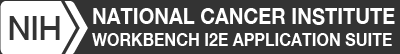
<style>
.page{position:relative;width:400px;height:54px;background:#333333}
.page>*{position:absolute;margin:0}
.t1{font:22px "HelveticaNeue-Bold";color:#ffffff;text-transform:uppercase;scale:0.91 1}
.t2{font:17.6px "HelveticaNeue-Bold";color:#ffffff;text-transform:uppercase;scale:0.91 1}
</style>
<div class="page">
<p class="t1" style="left:93px;top:8px;width:302px;height:17px">NATIONAL CANCER INSTITUTE</p>
<p class="t2" style="left:92px;top:33px;width:300px;height:13px">WORKBENCH I2E APPLICATION SUITE</p>
</div>
